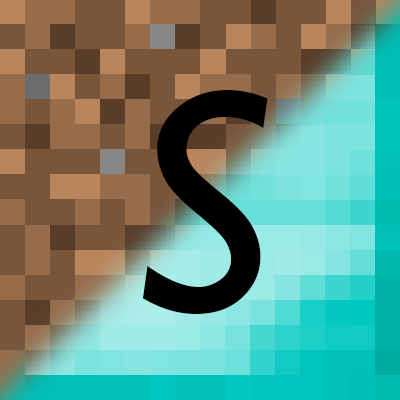
<style>
.page{position:relative;width:400px;height:400px}
.page>*{position:absolute;margin:0}
.t1{font:320px "GillSans-Italic";color:#000000}
</style>
<div class="page">
<p class="t1" style="left:142px;top:90px;width:126px;height:224px">S</p>
</div>
